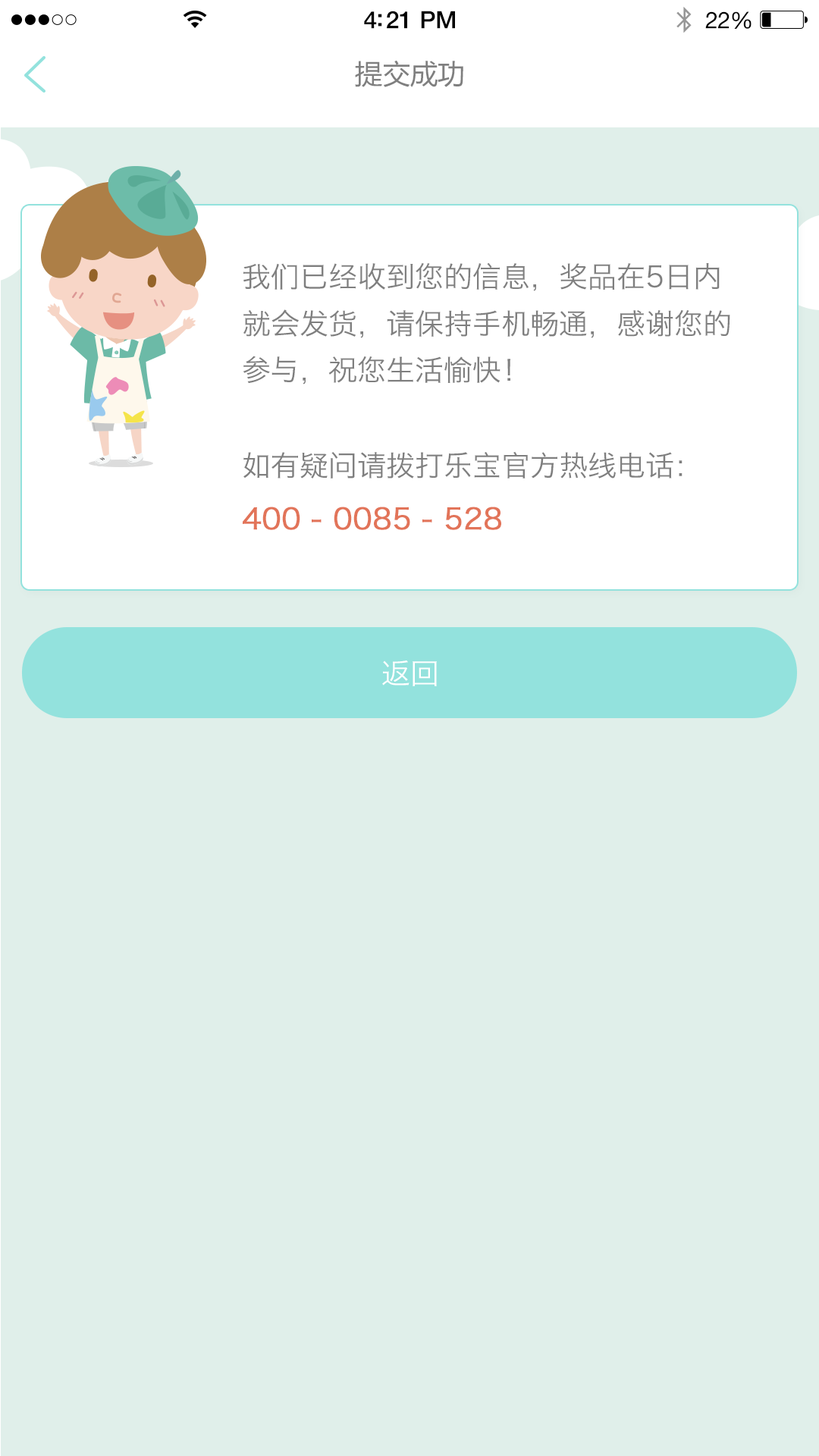
<style>
.page{position:relative;width:819px;height:1456px;background:#e0efea}
.page>*{position:absolute;margin:0}
.t1{font:23.9px "HelveticaNeue-Medium";letter-spacing:-0.02em;color:#000000}
.t2{font:22.9px "HelveticaNeue";letter-spacing:-0.02em;color:#000000}
.t3{font:27.3px "MicrosoftYaHei";color:#7f7f7f}
.t4{font:28.8px/46.8px "HiraginoSansGB-W3";color:#7f7f7f}
.t5{font:28.8px "HiraginoSansGB-W3";color:#7f7f7f}
.t6{font:28.8px "HiraginoSansGB-W3";color:#e27459;font-weight:bold}
.t7{font:28.8px "HiraginoSansGB-W3";color:#ffffff}
</style>
<div class="page">
<p class="t1" style="left:364px;top:11px;width:91px;height:18px">4:21 PM</p>
<p class="t2" style="left:705px;top:11px;width:46px;height:18px">22%</p>
<p class="t3" style="left:355px;top:60px;width:108px;height:27px">提交成功</p>
<p class="t4" style="left:243px;top:262px;width:487px;height:122px">我们已经收到您的信息，奖品在5日内<br>就会发货，请保持手机畅通，感谢您的<br>参与，祝您生活愉快！</p>
<p class="t5" style="left:243px;top:451px;width:439px;height:28px">如有疑问请拨打乐宝官方热线电话：</p>
<p class="t6" style="left:243px;top:507px;width:258px;height:23px">400 - 0085 - 528</p>
<p class="t7" style="left:382px;top:660px;width:55px;height:26px">返回</p>
</div>
